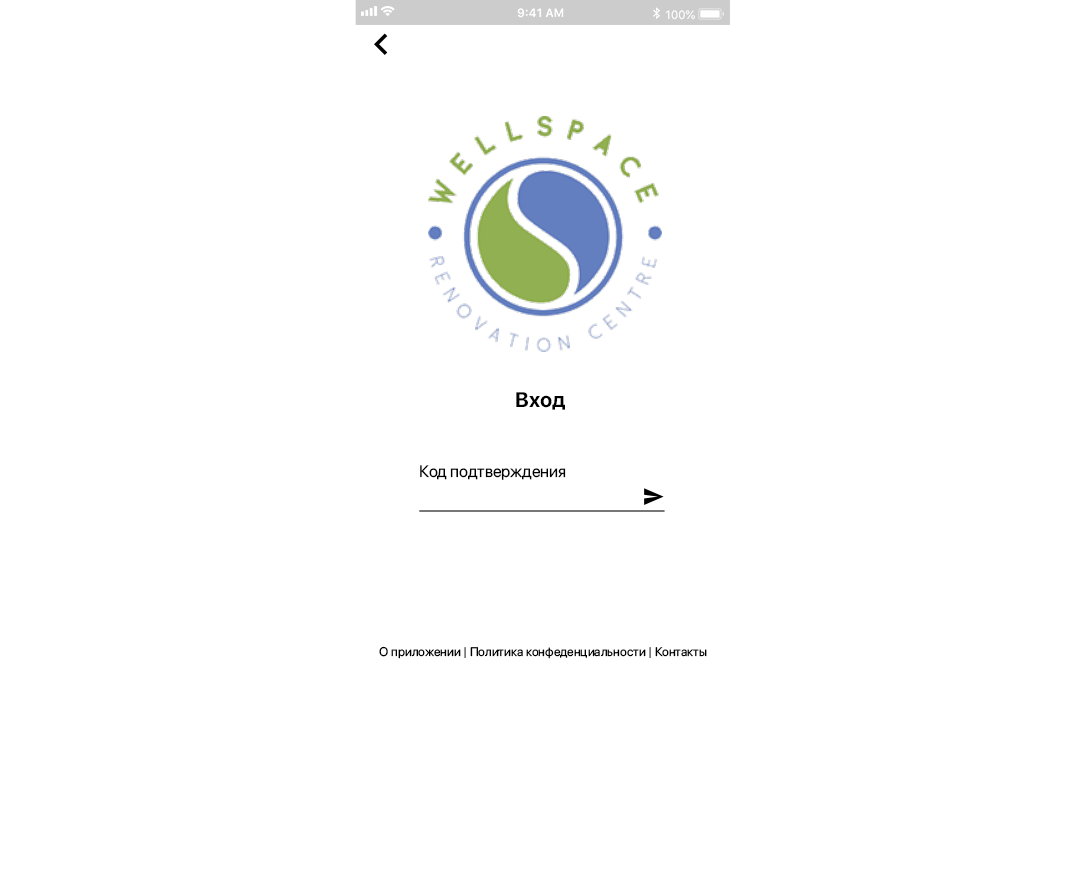
<style>
.page{position:relative;width:1080px;height:896px;background:#ffffff}
.page>*{position:absolute;margin:0}
.t1{font:21px "SFProDisplay-Bold";color:#000000}
.t2{font:16.5px "SFProDisplay-Regular";color:#000000}
.t3{font:12.5px "SFProDisplay-Regular";color:#000000}
</style>
<div class="page">
<p class="t1" style="left:516px;top:392px;width:49px;height:18px">Вход</p>
<p class="t2" style="left:420px;top:465px;width:146px;height:15px">Код подтверждения</p>
<p class="t3" style="left:379px;top:646px;width:328px;height:13px">О приложении | Политика конфеденциальности | Контакты</p>
</div>
